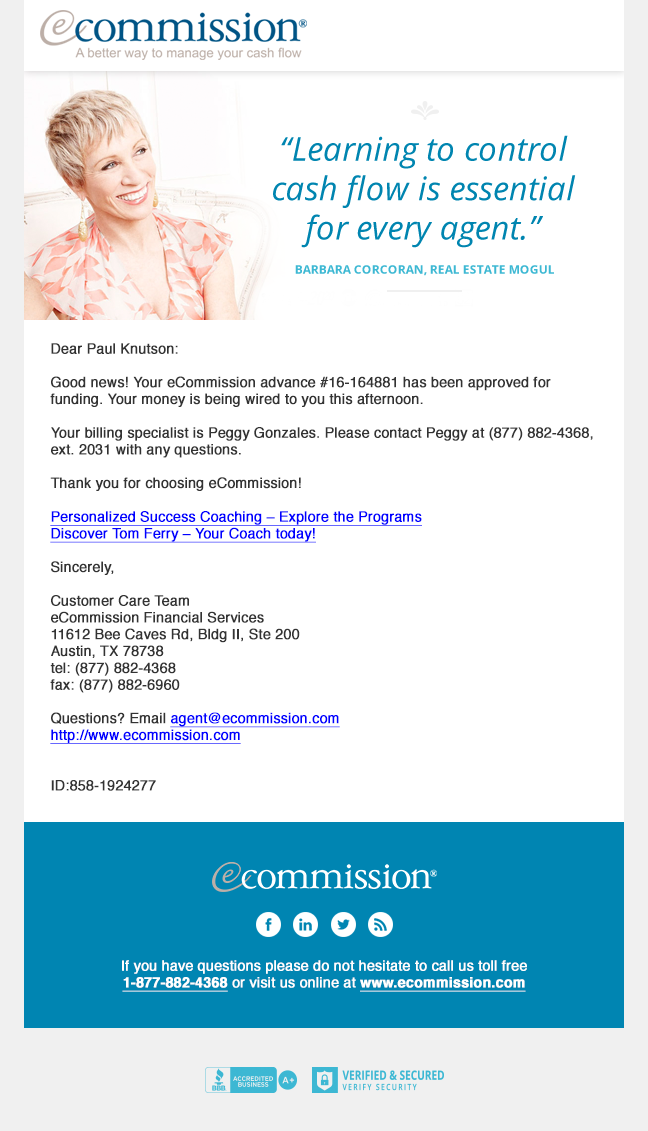
<style>
.page{position:relative;width:648px;height:1131px;background:#ffffff}
.page>*{position:absolute;margin:0}
.t1{font:14px "Helvetica";color:#333333;font-weight:bold}
.t2{font:14px "Helvetica";color:#0000ff;font-weight:bold;text-decoration:underline}
.t3{font:14px "Helvetica";color:#ffffff;font-weight:bold}
.t4{font:14px "Helvetica-Bold";color:#ffffff;font-weight:bold;text-decoration:underline}
</style>
<div class="page">
<p class="t1" style="left:50px;top:343px;width:543px;height:448px">Dear Paul Knutson:<br><br>Good news! Your eCommission advance #16-164881 has been approved for funding. Your money is being wired to you this afternoon.<br><br>Your billing specialist is Peggy Gonzales. Please contact Peggy at (877) 882-4368, ext. 2031 with any questions.<br><br>Thank you for choosing eCommission!<br><br><span class="t2">Personalized Success Coaching – Explore the Programs<br>Discover Tom Ferry – Your Coach today!</span> <br><br>Sincerely,<br><br>Customer Care Team<br>eCommission Financial Services<br>11612 Bee Caves Rd, Bldg II, Ste 200<br>Austin, TX 78738<br>tel: (877) 882-4368<br>fax: (877) 882-6960<br><br>Questions? Email <span class="t2">agent@ecommission.com<br>http://www.ecommission.com<br></span><br><br>ID:858-1924277</p>
<p class="t3" style="left:122px;top:960px;width:405px;height:32px;text-align:center">If you have questions please do not hesitate to call us toll free<br><span class="t4">1‑877‑882‑4368</span> or visit us online at <span class="t4">www.ecommission.com</span></p>
</div>
